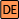
<style>
.page{position:relative;width:19px;height:19px;background:#ff9654}
.page>*{position:absolute;margin:0}
.t1{font:12.9px "Cabin-Regular";color:#000000;scale:0.85 1}
</style>
<div class="page">
<p class="t1" style="left:3px;top:5px;width:14px;height:9px">DE</p>
</div>
